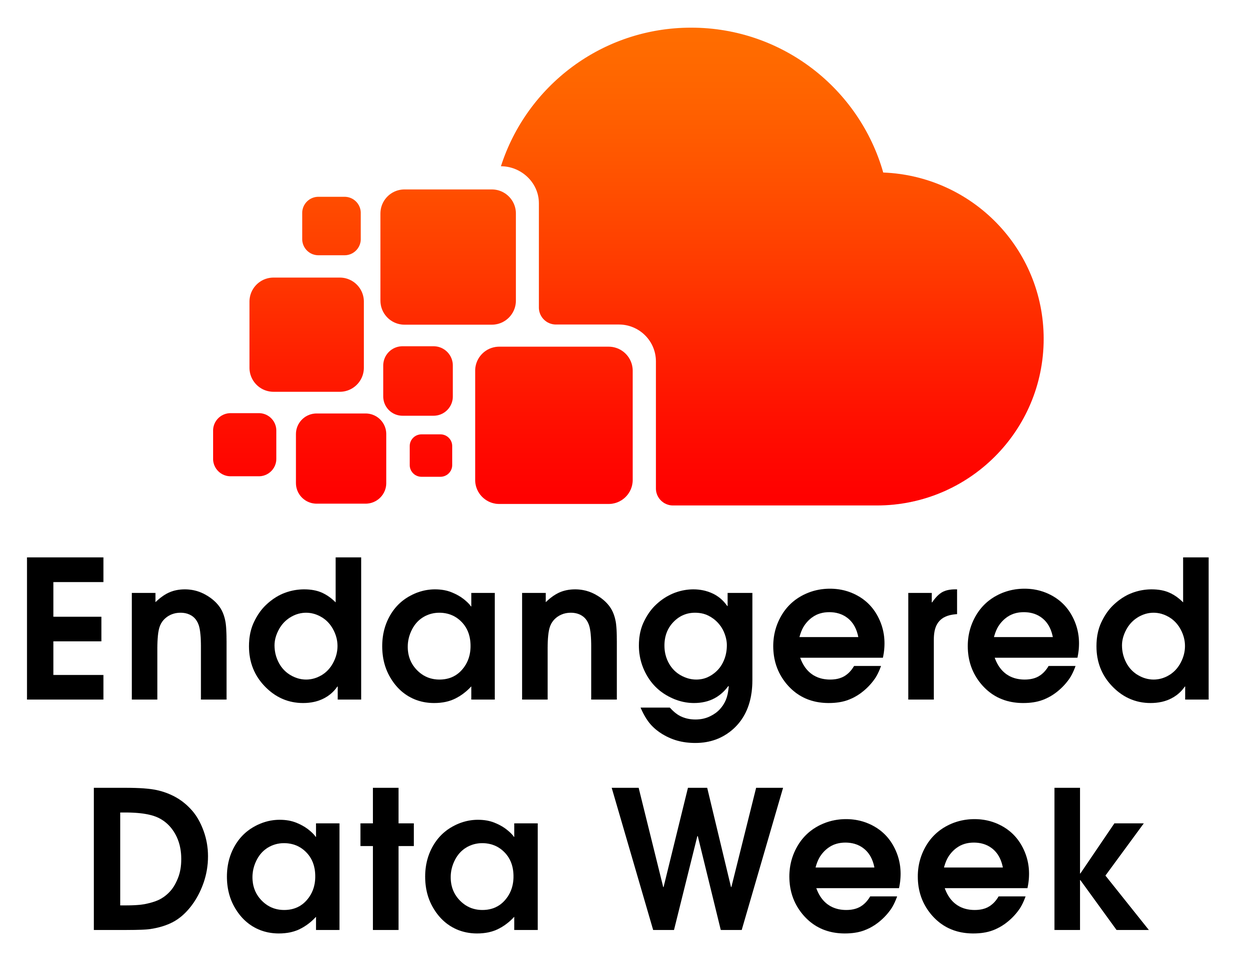
<style>
.page{position:relative;width:1239px;height:963px;background:#ffffff}
.page>*{position:absolute;margin:0}
.t1{font:191.9px "AvantGardeCE-Demi";letter-spacing:0.025em;color:#000000}
</style>
<div class="page">
<p class="t1" style="left:27px;top:557px;width:1181px;height:376px;text-align:center">Endangered<br>Data Week</p>
</div>
